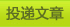
<style>
.page{position:relative;width:70px;height:27px}
.page>*{position:absolute;margin:0}
.t1{font:14px "MicrosoftYaHei";color:#5d6f23;font-weight:bold}
</style>
<div class="page">
<p class="t1" style="left:6px;top:6px;width:58px;height:15px">投递文章</p>
</div>
